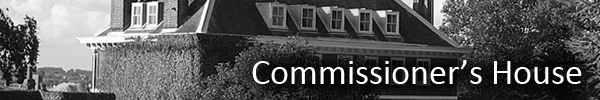
<style>
.page{position:relative;width:600px;height:100px}
.page>*{position:absolute;margin:0}
.t1{font:36px "Calibri";color:#ffffff}
</style>
<div class="page">
<p class="t1" style="left:252px;top:60px;width:330px;height:24px">Commissioner’s House</p>
</div>
